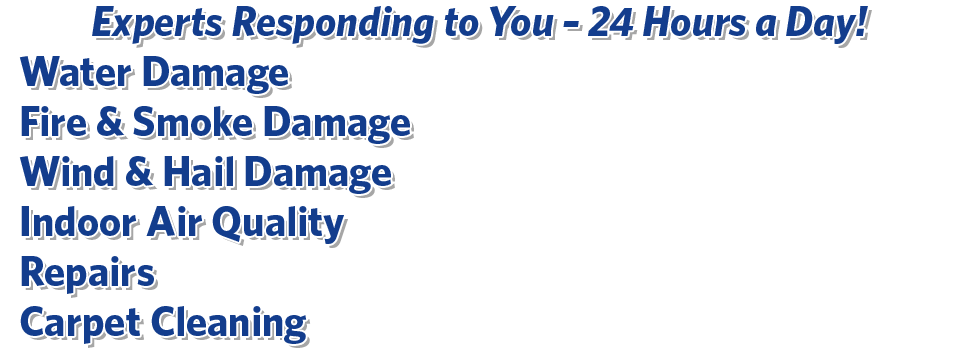
<style>
.page{position:relative;width:960px;height:350px;background:#ffffff}
.page>*{position:absolute;margin:0}
.t1{font:42px "WhitneyHTF-BoldItalic";color:#133d8d}
.t2{font:42px "WhitneyHTF-Bold";color:#133d8d}
</style>
<div class="page">
<p class="t1" style="left:92px;top:6px;width:776px;height:38px">Experts Responding to You – 24 Hours a Day!</p>
<p class="t2" style="left:19px;top:56px;width:269px;height:38px">Water Damage</p>
<p class="t2" style="left:21px;top:106px;width:389px;height:38px">Fire &amp; Smoke Damage</p>
<p class="t2" style="left:19px;top:156px;width:372px;height:38px">Wind &amp; Hail Damage</p>
<p class="t2" style="left:21px;top:206px;width:323px;height:38px">Indoor Air Quality</p>
<p class="t2" style="left:21px;top:256px;width:133px;height:38px">Repairs</p>
<p class="t2" style="left:20px;top:306px;width:287px;height:38px">Carpet Cleaning</p>
</div>
